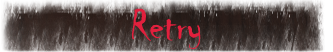
<style>
.page{position:relative;width:333px;height:52px}
.page>*{position:absolute;margin:0}
.t1{font:44px "Chiller-Regular";color:#e1203d}
</style>
<div class="page">
<p class="t1" style="left:131px;top:8px;width:70px;height:41px">Retry</p>
</div>
